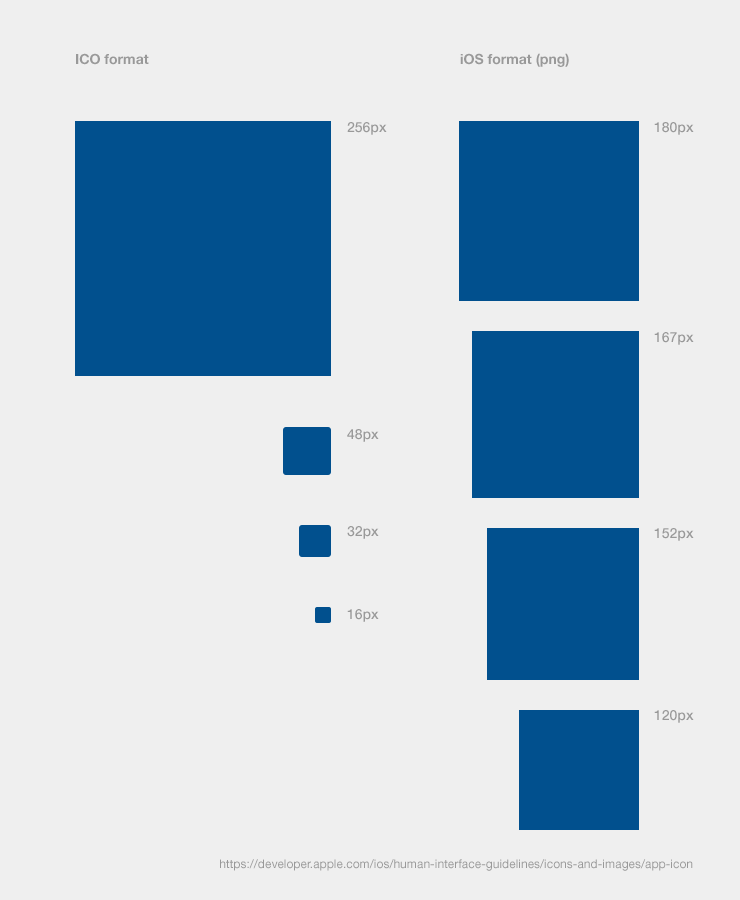
<style>
.page{position:relative;width:740px;height:900px;background:#efefef}
.page>*{position:absolute;margin:0}
.t1{font:14px "HelveticaNeueLTStd-Bd";color:#999999}
.t2{font:14px/99px "HelveticaNeueLTStd-Md";color:#999999}
.t3{font:14px/307px "HelveticaNeueLTStd-Md";color:#999999}
.t4{font:14px/97px "HelveticaNeueLTStd-Md";color:#999999}
.t5{font:14px/83px "HelveticaNeueLTStd-Md";color:#999999}
.t6{font:14px "HelveticaNeueLTStd-Md";color:#999999}
.t7{font:12px "HelveticaNeueLTStd-Roman";color:#999999}
</style>
<div class="page">
<p class="t1" style="left:76px;top:53px;width:73px;height:12px">ICO format</p>
<p class="t1" style="left:460px;top:53px;width:109px;height:14px">iOS format (png)</p>
<p class="t2" style="left:347px;top:122px;width:40px;height:500px">256px<br><span class="t3">48px<br></span><span class="t4">32px<br></span><span class="t5">16px</span></p>
<p class="t6" style="left:654px;top:122px;width:40px;height:13px">180px</p>
<p class="t6" style="left:654px;top:332px;width:40px;height:13px">167px</p>
<p class="t6" style="left:654px;top:528px;width:40px;height:13px">152px</p>
<p class="t6" style="left:654px;top:710px;width:40px;height:13px">120px</p>
<p class="t7" style="left:220px;top:859px;width:473px;height:12px">https://developer.apple.com/ios/human-interface-guidelines/icons-and-images/app-icon</p>
</div>
